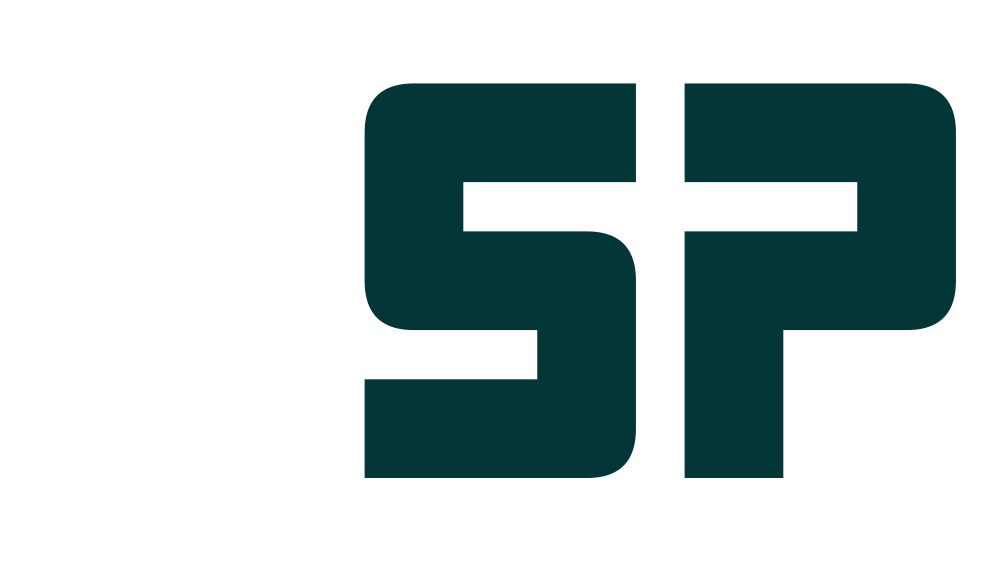
<style>
.page{position:relative;width:1000px;height:562px;background:#ffffff}
.page>*{position:absolute;margin:0}
.t1{font:505.2px "AlienAndroid";color:#043638}
.t2{font:505.2px "AlienAndroid";color:#ffffff}
</style>
<div class="page">
<p class="t1" style="left:43px;top:83px;width:913px;height:395px"><span class="t2">K</span>SP</p>
</div>
